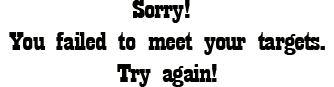
<style>
.page{position:relative;width:334px;height:87px;background:#ffffff}
.page>*{position:absolute;margin:0}
.t1{font:26.8px "Playbill";letter-spacing:-0.025em;color:#020200;scale:1.71 1}
</style>
<div class="page">
<p class="t1" style="left:9px;top:0px;width:316px;height:87px;text-align:center">Sorry! <br>You failed to meet your targets.<br>Try again!</p>
</div>
